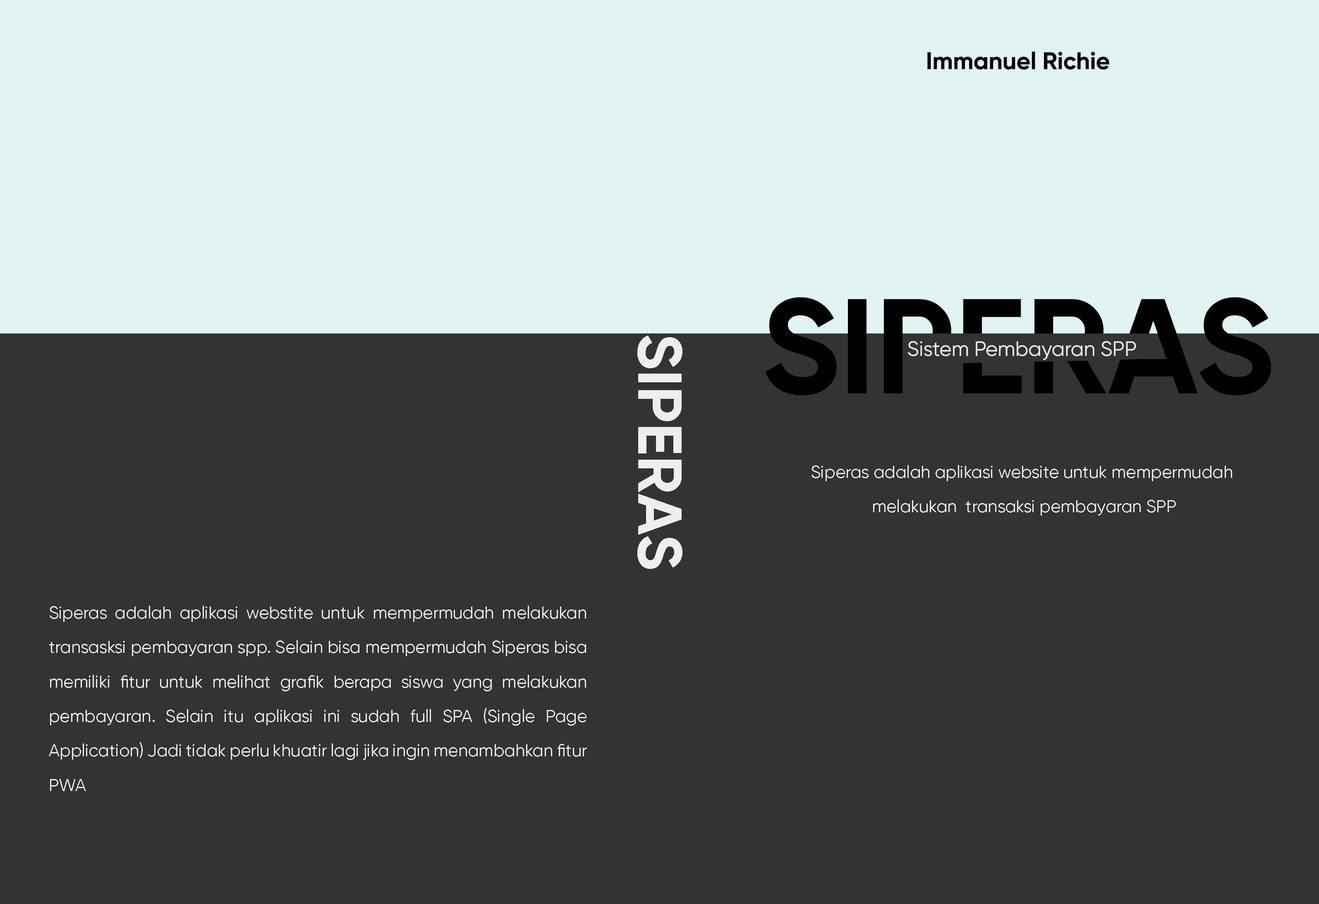
<style>
.page{position:relative;width:1319px;height:904px;background:#333333}
.page>*{position:absolute;margin:0}
.t1{font:24.1px "Gilroy-Bold";color:#000000}
.t2{font:134.4px "Gilroy-Bold";color:#000000}
.t3{font:62.1px "Gilroy-Bold";color:#eeeeee}
.t4{font:20.7px "Gilroy-Regular";color:#eeeeee}
.t5{font:17.2px/34.5px "Gilroy-Regular";color:#eeeeee}
</style>
<div class="page">
<p class="t1" style="left:927px;top:51px;width:182px;height:18px">Immanuel Richie</p>
<p class="t2" style="left:765px;top:297px;width:506px;height:98px">SIPERAS</p>
<p class="t3" style="left:637px;top:335px;width:46px;height:234px;rotate:90deg">SIPERAS</p>
<p class="t4" style="left:908px;top:341px;width:228px;height:19px">Sistem Pembayaran SPP</p>
<p class="t5" style="left:812px;top:465px;width:420px;height:50px;text-align:center">Siperas adalah aplikasi website untuk mempermudah <br>melakukan  transaksi pembayaran SPP</p>
<p class="t5" style="left:49px;top:606px;width:538px;height:185px;text-align:justify">Siperas adalah aplikasi webstite untuk mempermudah melakukan transasksi pembayaran spp. Selain bisa mempermudah Siperas bisa memiliki fitur untuk melihat grafik berapa siswa yang melakukan pembayaran. Selain itu aplikasi ini sudah full SPA (Single Page Application) Jadi tidak perlu khuatir lagi jika ingin menambahkan fitur PWA</p>
</div>
